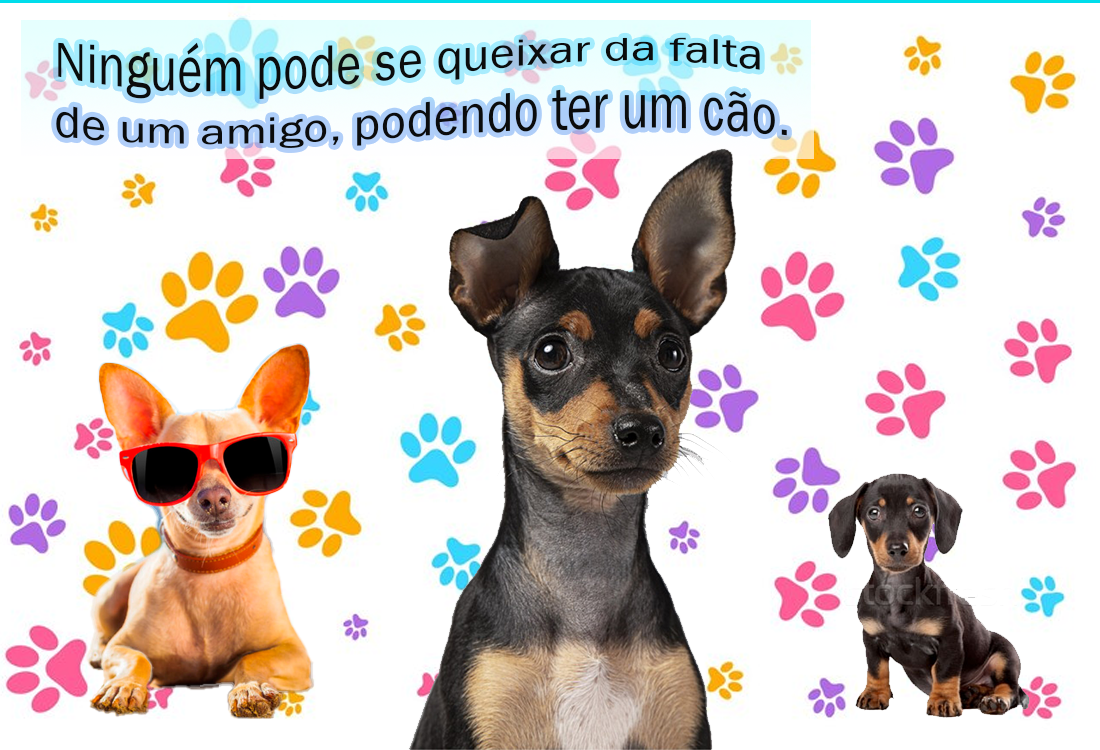
<style>
.page{position:relative;width:1100px;height:750px;background:#ffffff}
.page>*{position:absolute;margin:0}
.t1{font:50px "FranklinGothic-Book";color:#0b0c0c}
</style>
<div class="page">
<p class="t1" style="left:56px;top:37px;width:731px;height:111px">Ninguém pode se queixar da falta<br>de um amigo, podendo ter um cão.</p>
</div>
